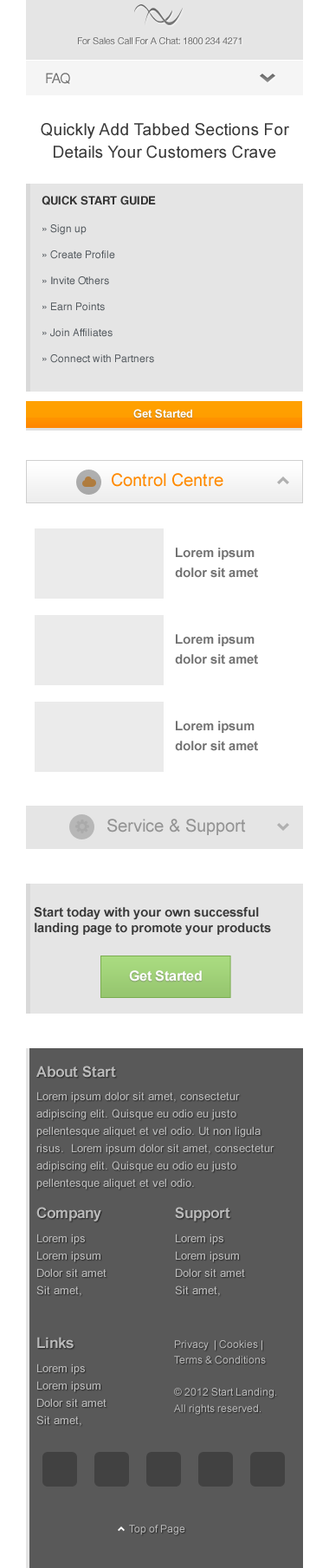
<style>
.page{position:relative;width:329px;height:1568px;background:#ffffff}
.page>*{position:absolute;margin:0}
.t1{font:9.5px "HelveticaNeue-Roman";letter-spacing:-0.02em;color:#6f6f6f}
.t2{font:13.9px "HelveticaNeue-Roman";letter-spacing:-0.02em;color:#717171}
.t3{font:16.5px/22.7px "ArialMT";color:#393939}
.t4{font:11.3px "Helvetica-Bold";color:#333333}
.t5{font:10.4px/26px "Helvetica";color:#53595e}
.t6{font:11.3px "Arial-BoldMT";color:#fefefe}
.t7{font:17.3px "ArialMT";color:#ff8a00}
.t8{font:13px/20px "Arial-BoldMT";color:#717171}
.t9{font:17.3px "ArialMT";color:#939393}
.t10{font:13px/15.6px "Arial-BoldMT";color:#3a3a3a}
.t11{font:13.9px "Arial-BoldMT";color:#fefefe}
.t12{font:14.7px "Arial-BoldMT";color:#bbbbbb}
.t13{font:11.3px/17.3px "ArialMT";color:#bbbbbb}
.t14{font:14.7px "Arial-BoldMT";color:#bababa}
.t15{font:11.3px "ArialMT";color:#bbbbbb}
.t16{font:10.4px/16px "ArialMT";color:#bababa}
.t17{font:10.4px "ArialMT";color:#bbbbbb}
</style>
<div class="page">
<p class="t1" style="left:78px;top:37px;width:164px;height:8px">For Sales Call For A Chat: 1800 234 4271</p>
<p class="t2" style="left:46px;top:73px;width:24px;height:11px">FAQ</p>
<p class="t3" style="left:41px;top:123px;width:248px;height:36px;text-align:center">Quickly Add Tabbed Sections For Details Your Customers Crave</p>
<p class="t4" style="left:42px;top:196px;width:114px;height:9px">QUICK START GUIDE</p>
<p class="t5" style="left:42px;top:224px;width:112px;height:139px">» Sign up<br>» Create Profile<br>» Invite Others<br>» Earn Points<br>» Join Affiliates<br>» Connect with Partners</p>
<p class="t6" style="left:133px;top:409px;width:59px;height:9px">Get Started</p>
<p class="t7" style="left:112px;top:473px;width:112px;height:14px">Control Centre</p>
<p class="t8" style="left:175px;top:548px;width:83px;height:30px">Lorem ipsum dolor sit amet</p>
<p class="t8" style="left:175px;top:634px;width:83px;height:30px">Lorem ipsum dolor sit amet</p>
<p class="t8" style="left:175px;top:721px;width:83px;height:30px">Lorem ipsum dolor sit amet</p>
<p class="t9" style="left:107px;top:819px;width:139px;height:16px">Service &amp; Support</p>
<p class="t10" style="left:34px;top:907px;width:237px;height:29px">Start today with your own successful landing page to promote your products</p>
<p class="t11" style="left:129px;top:970px;width:73px;height:12px">Get Started</p>
<p class="t12" style="left:36px;top:1066px;width:80px;height:12px">About Start</p>
<p class="t13" style="left:36px;top:1092px;width:239px;height:97px">Lorem ipsum dolor sit amet, consectetur adipiscing elit. Quisque eu odio eu justo pellentesque aliquet et vel odio. Ut non ligula risus.  Lorem ipsum dolor sit amet, consectetur adipiscing elit. Quisque eu odio eu justo pellentesque aliquet et vel odio.</p>
<p class="t14" style="left:36px;top:1207px;width:65px;height:14px">Company</p>
<p class="t14" style="left:175px;top:1207px;width:55px;height:14px">Support</p>
<p class="t15" style="left:37px;top:1234px;width:48px;height:11px">Lorem ips</p>
<p class="t15" style="left:176px;top:1234px;width:48px;height:11px">Lorem ips</p>
<p class="t15" style="left:37px;top:1251px;width:63px;height:11px">Lorem ipsum</p>
<p class="t15" style="left:176px;top:1251px;width:63px;height:11px">Lorem ipsum</p>
<p class="t15" style="left:37px;top:1268px;width:70px;height:9px">Dolor sit amet</p>
<p class="t15" style="left:176px;top:1268px;width:69px;height:9px">Dolor sit amet</p>
<p class="t15" style="left:36px;top:1286px;width:45px;height:10px">Sit amet,</p>
<p class="t15" style="left:175px;top:1286px;width:45px;height:10px">Sit amet,</p>
<p class="t14" style="left:37px;top:1337px;width:37px;height:12px">Links</p>
<p class="t16" style="left:174px;top:1340px;width:102px;height:75px">Privacy  | Cookies | Terms &amp; Conditions <br><br>© 2012 Start Landing. All rights reserved.</p>
<p class="t15" style="left:37px;top:1364px;width:48px;height:11px">Lorem ips</p>
<p class="t15" style="left:37px;top:1381px;width:63px;height:11px">Lorem ipsum</p>
<p class="t15" style="left:37px;top:1398px;width:70px;height:9px">Dolor sit amet</p>
<p class="t15" style="left:36px;top:1416px;width:45px;height:10px">Sit amet,</p>
<p class="t17" style="left:129px;top:1525px;width:56px;height:10px">Top of Page</p>
</div>
